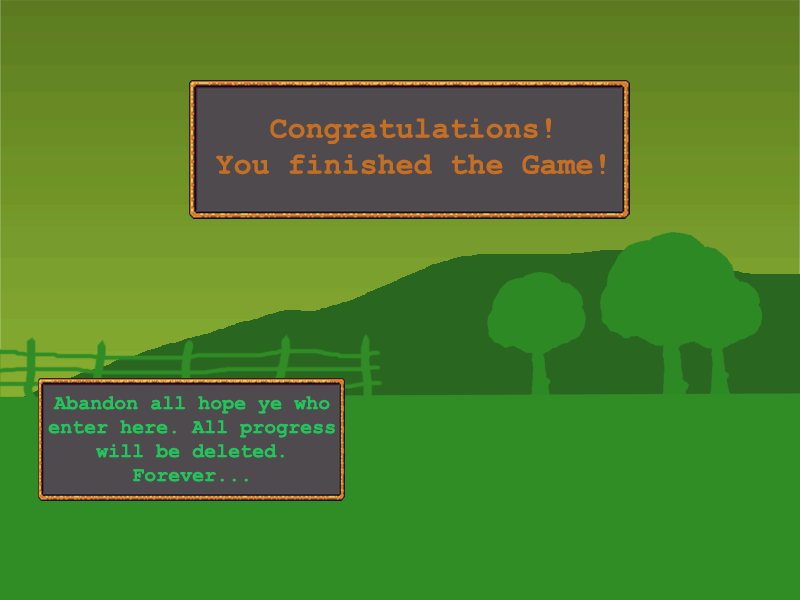
<style>
.page{position:relative;width:800px;height:600px;background:#308d25}
.page>*{position:absolute;margin:0}
.t1{font:30px "CourierNewPS-BoldMT";color:#c56f22}
.t2{font:20px "CourierNewPS-BoldMT";color:#22c55c}
</style>
<div class="page">
<p class="t1" style="left:216px;top:118px;width:389px;height:57px;text-align:center">Congratulations!<br>You finished the Game!</p>
<p class="t2" style="left:48px;top:396px;width:287px;height:86px;text-align:center">Abandon all hope ye who<br>enter here. All progress<br>will be deleted.<br>Forever...</p>
</div>
